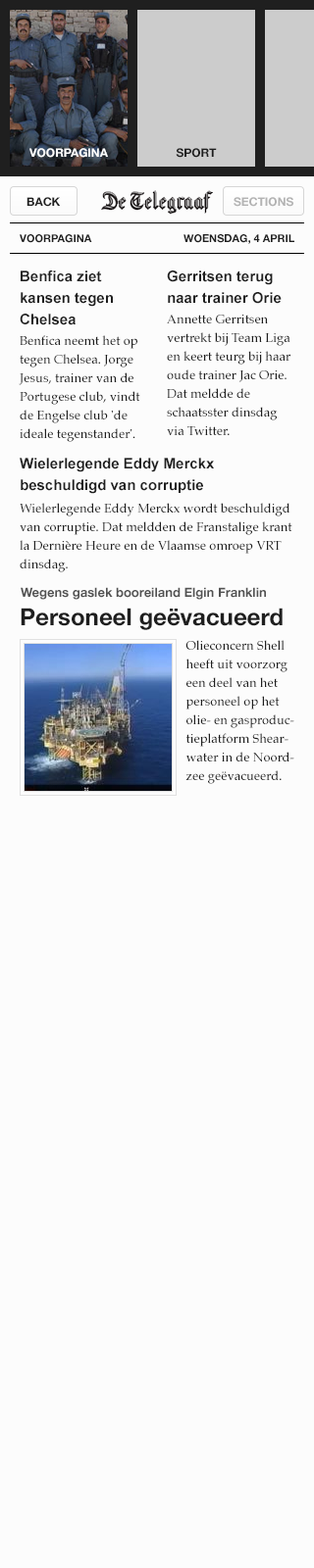
<style>
.page{position:relative;width:314px;height:1568px;background:#fcfcfc}
.page>*{position:absolute;margin:0}
.t1{font:11.8px "HelveticaNeue-Bold";color:#ffffff;text-transform:uppercase}
.t2{font:11.8px "HelveticaNeue-Bold";color:#1f1f1f;text-transform:uppercase}
.t3{font:11.8px "HelveticaNeue-Bold";color:#b3b3b3}
.t4{font:10.8px "HelveticaNeue-Bold";color:#1f1f1f;text-transform:uppercase}
.t5{font:14.7px/21.6px "Arial-BoldMT";color:#1f1f1f}
.t6{font:12.7px/18.6px "Palatino-Roman";color:#1f1f1f}
.t7{font:12.7px "HelveticaNeue-Bold";color:#525252}
.t8{font:23.5px "HelveticaNeue-Bold";color:#1f1f1f}
</style>
<div class="page">
<p class="t1" style="left:29px;top:148px;width:79px;height:10px">voorpagina</p>
<p class="t2" style="left:175px;top:148px;width:42px;height:10px">sport</p>
<p class="t2" style="left:26px;top:197px;width:35px;height:10px">Back</p>
<p class="t3" style="left:233px;top:197px;width:60px;height:10px">SECTIONS</p>
<p class="t4" style="left:20px;top:234px;width:72px;height:9px">Voorpagina</p>
<p class="t4" style="left:183px;top:234px;width:111px;height:10px">WOensdag, 4 April</p>
<p class="t5" style="left:20px;top:270px;width:93px;height:55px">Benfica ziet kansen tegen Chelsea</p>
<p class="t5" style="left:167px;top:270px;width:114px;height:34px">Gerritsen terug naar trainer Orie</p>
<p class="t6" style="left:167px;top:315px;width:123px;height:120px">Annette Gerritsen vertrekt bij Team Liga en keert teurg bij haar oude trainer Jac Orie. Dat meldde de schaatsster dinsdag via Twitter.</p>
<p class="t6" style="left:19px;top:335px;width:121px;height:107px">Benfica neemt het op tegen Chelsea. Jorge Jesus, trainer van de Portugese club, vindt de Engelse club 'de ideale tegenstander'.</p>
<p class="t5" style="left:20px;top:458px;width:194px;height:36px">Wielerlegende Eddy Merckx <br>beschuldigd van corruptie</p>
<p class="t6" style="left:20px;top:503px;width:272px;height:69px">Wielerlegende Eddy Merckx wordt beschuldigd van corruptie. Dat meldden de Franstalige krant la Dernière Heure en de Vlaamse omroep VRT dinsdag.</p>
<p class="t7" style="left:21px;top:587px;width:245px;height:13px">Wegens gaslek booreiland Elgin Franklin</p>
<p class="t8" style="left:21px;top:608px;width:261px;height:22px">Personeel geëvacueerd</p>
<p class="t6" style="left:185px;top:640px;width:109px;height:144px">Olieconcern Shell heeft uit voorzorg een deel van het personeel op het olie- en gasproductieplatform Shearwater in de Noordzee geëvacueerd.</p>
</div>
